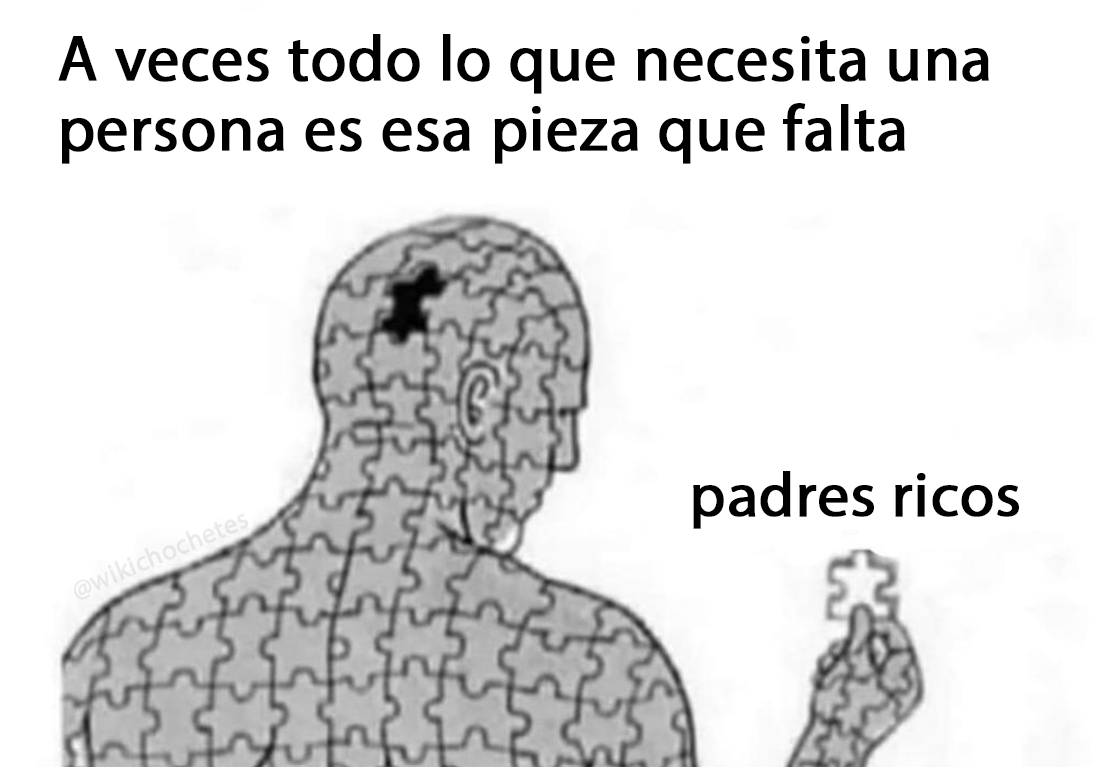
<style>
.page{position:relative;width:1103px;height:767px;background:#ffffff}
.page>*{position:absolute;margin:0}
.t1{font:64.7px "MyriadPro-Regular";color:#000000;font-weight:bold}
.t2{font:62.4px "MyriadPro-Regular";color:#000000;font-weight:bold}
</style>
<div class="page">
<p class="t1" style="left:58px;top:34px;width:931px;height:130px">A veces todo lo que necesita una<br>persona es esa pieza que falta</p>
<p class="t2" style="left:693px;top:471px;width:326px;height:58px">padres ricos</p>
</div>
